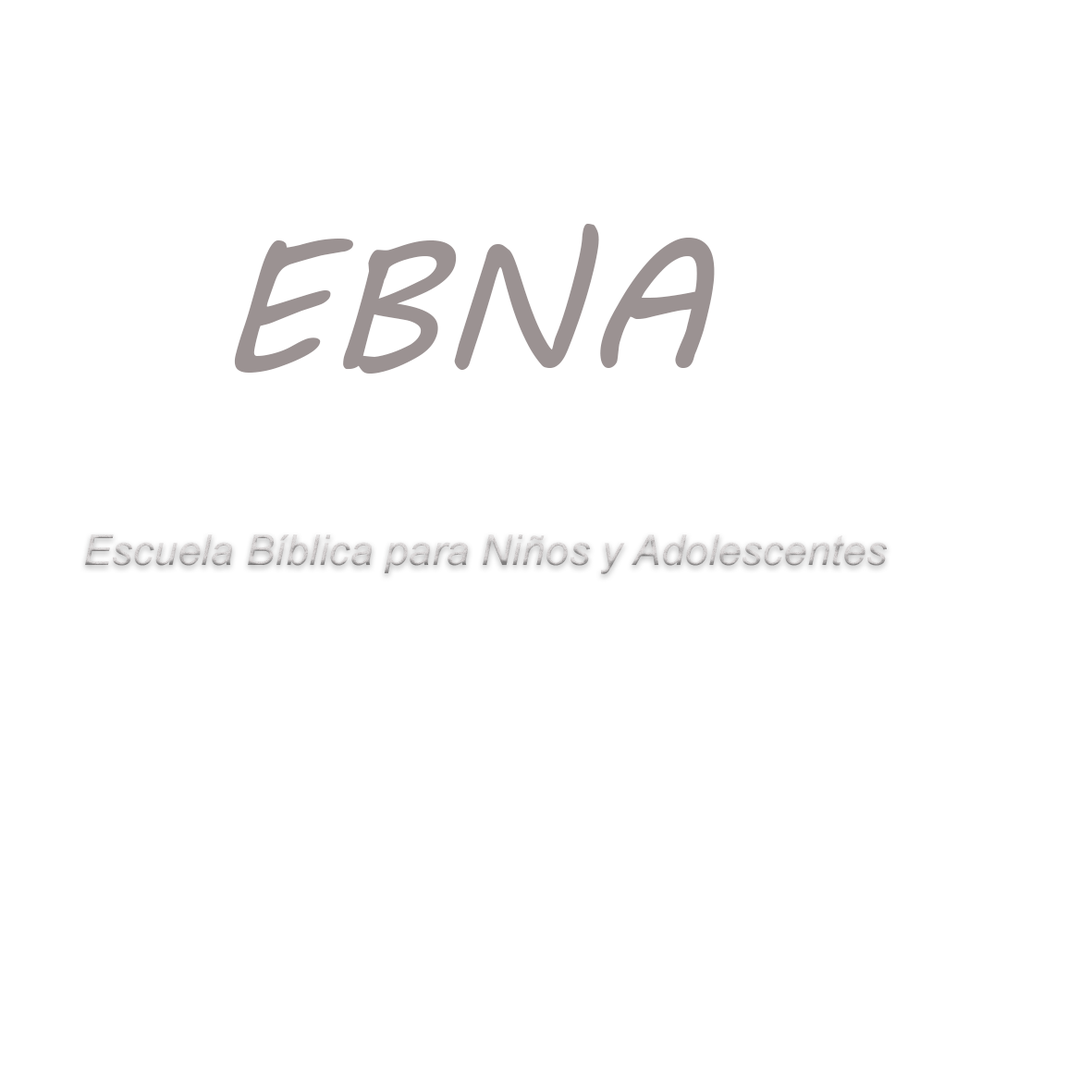
<style>
.page{position:relative;width:1092px;height:1092px;background:#ffffff}
.page>*{position:absolute;margin:0}
.t1{font:184.9px "MVBoli";color:#9b9292}
.t2{font:42.4px "Arial-ItalicMT"}
</style>
<div class="page">
<p class="t1" style="left:234px;top:224px;width:481px;height:150px">EBNA</p>
<p class="t2" style="left:85px;top:534px;width:802px;height:40px">Escuela Bíblica para Niños y Adolescentes</p>
</div>
